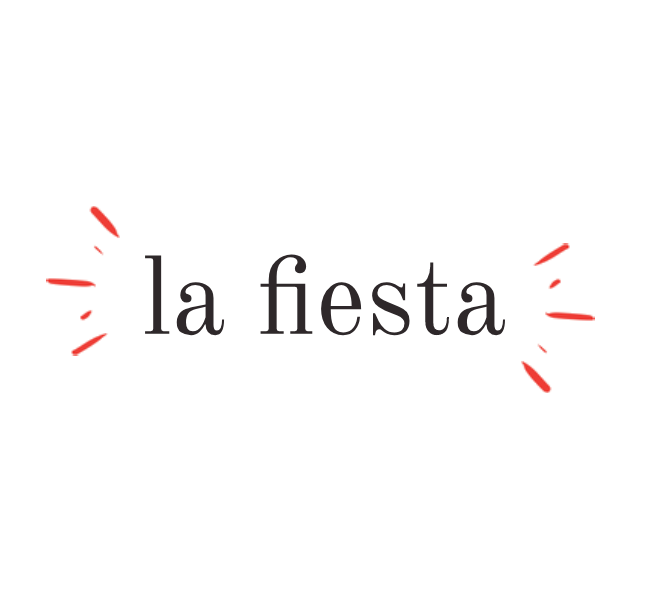
<style>
.page{position:relative;width:650px;height:590px;background:#ffffff}
.page>*{position:absolute;margin:0}
.t1{font:110px "OldStandardTT-Regular";color:#2e282a}
</style>
<div class="page">
<p class="t1" style="left:145px;top:254px;width:360px;height:82px">la fiesta</p>
</div>
